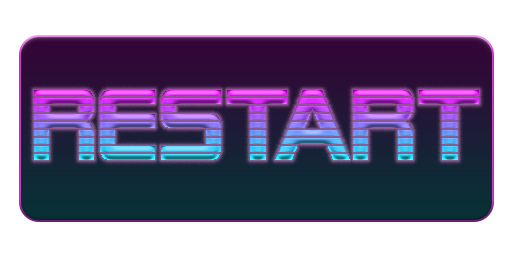
<style>
.page{position:relative;width:512px;height:256px;background:#ffffff}
.page>*{position:absolute;margin:0}
.t1{font:100px "AlienEncounters"}
</style>
<div class="page">
<p class="t1" style="left:34px;top:90px;width:445px;height:70px">Restart</p>
</div>
